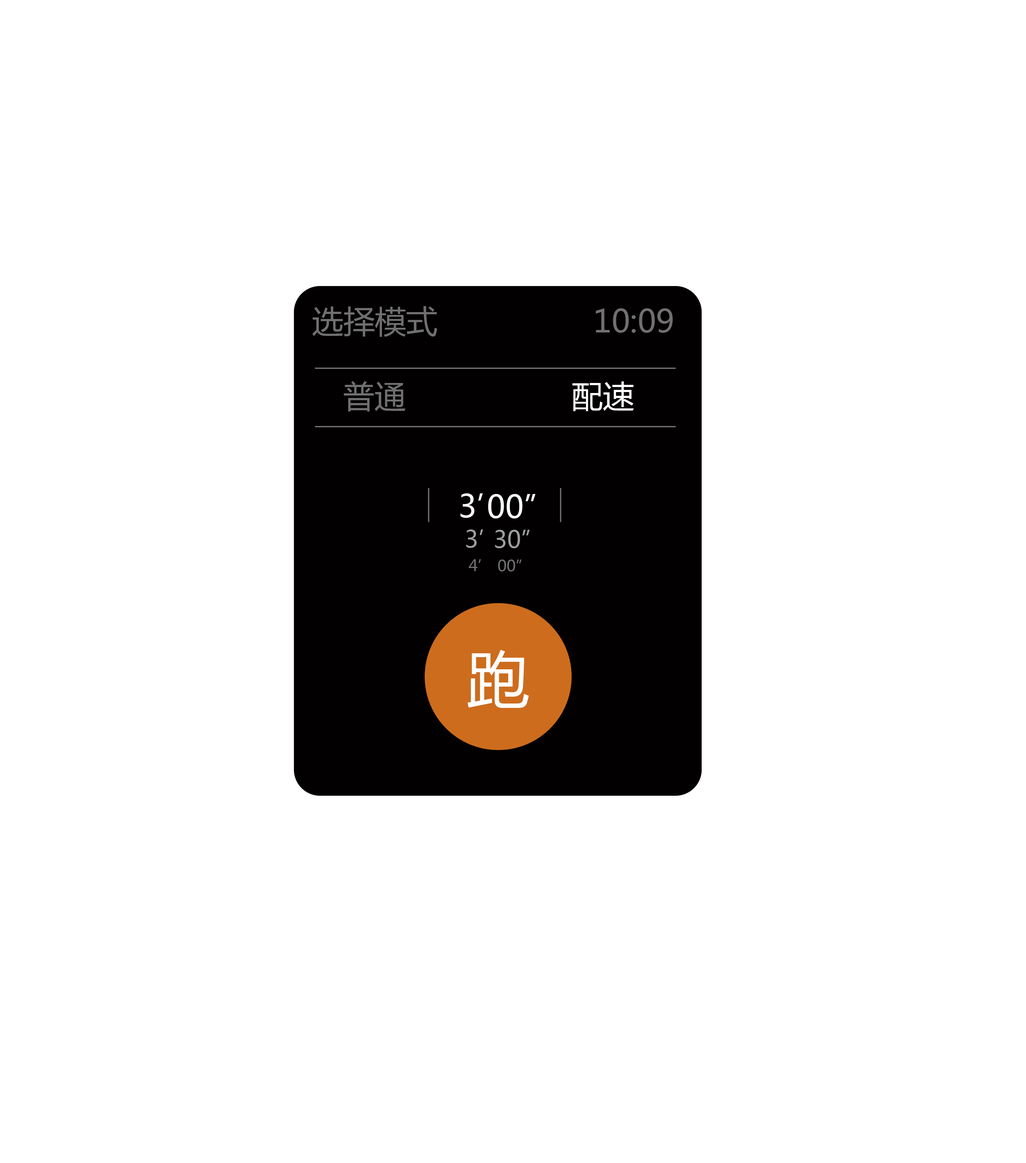
<style>
.page{position:relative;width:1026px;height:1163px;background:#ffffff}
.page>*{position:absolute;margin:0}
.t1{font:31.4px "MicrosoftYaHei";color:#717071}
.t2{font:31.4px "MicrosoftYaHei";color:#ffffff}
.t3{font:23.5px "MicrosoftYaHei";color:#9e9e9f}
.t4{font:15.7px "MicrosoftYaHei";color:#717071}
.t5{font:62.7px "MicrosoftYaHei";color:#ffffff}
</style>
<div class="page">
<p class="t1" style="left:312px;top:306px;width:125px;height:31px">选择模式</p>
<p class="t1" style="left:595px;top:308px;width:78px;height:25px">10:09</p>
<p class="t1" style="left:344px;top:381px;width:61px;height:30px">普通</p>
<p class="t2" style="left:572px;top:381px;width:62px;height:30px">配速</p>
<p class="t2" style="left:460px;top:493px;width:23px;height:25px">3’</p>
<p class="t2" style="left:488px;top:494px;width:47px;height:24px">00”</p>
<p class="t3" style="left:466px;top:529px;width:17px;height:19px">3’</p>
<p class="t3" style="left:495px;top:530px;width:35px;height:18px">30”</p>
<p class="t4" style="left:468px;top:559px;width:13px;height:12px">4’</p>
<p class="t4" style="left:498px;top:559px;width:23px;height:12px">00”</p>
<p class="t5" style="left:467px;top:649px;width:62px;height:59px">跑</p>
</div>
